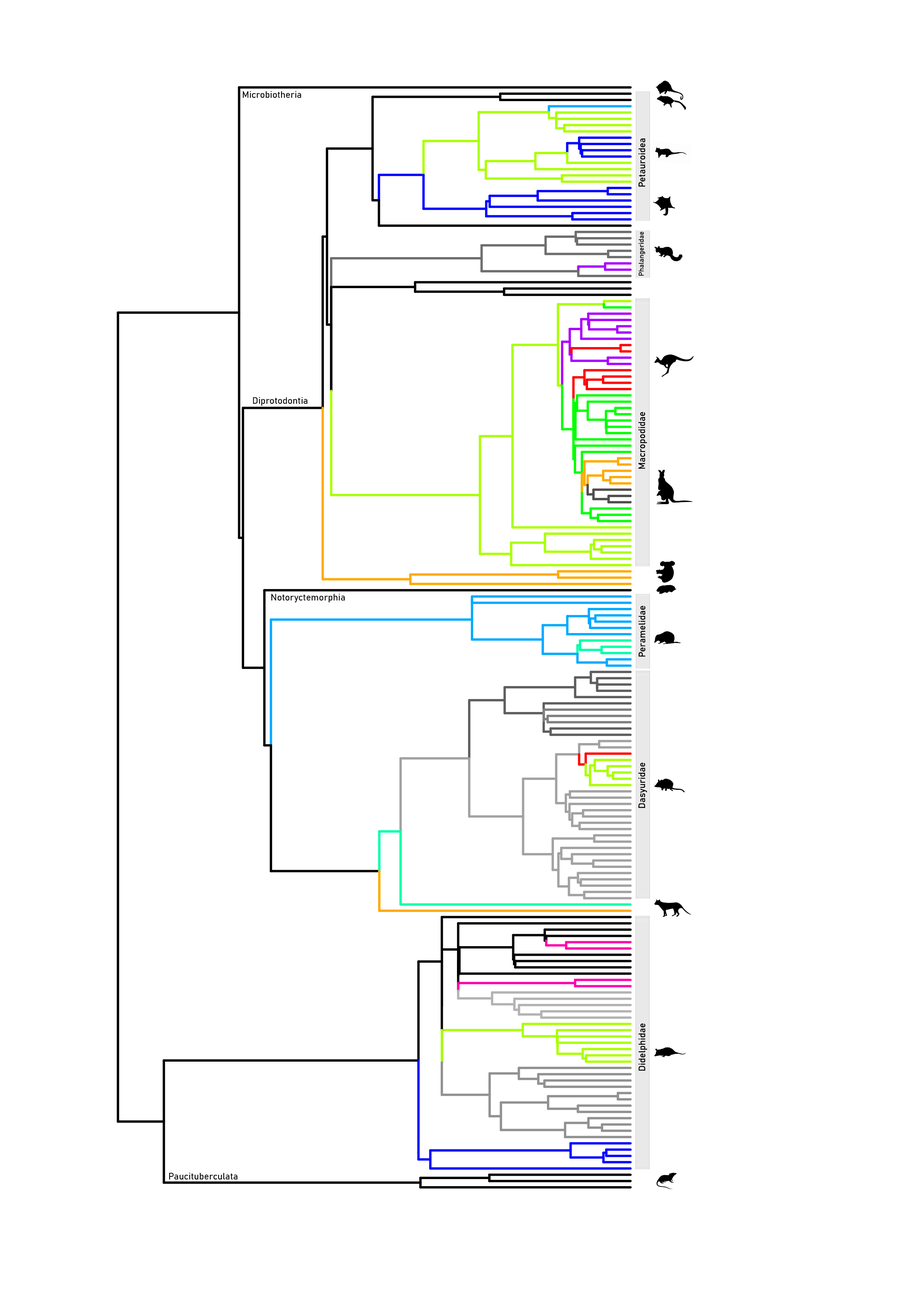
<style>
.page{position:relative;width:918px;height:1298px;background:#ffffff}
.page>*{position:absolute;margin:0}
.t1{font:9.3px "Bahnschrift";color:#000000}
.t2{font:6.9px "Bahnschrift";color:#000000}
</style>
<div class="page">
<p class="t1" style="left:243px;top:91px;width:58px;height:7px">Microbiotheria</p>
<p class="t1" style="left:639px;top:138px;width:7px;height:49px;rotate:-90deg">Petauroidea</p>
<p class="t2" style="left:639px;top:232px;width:7px;height:44px;rotate:-90deg">Phalangeridae</p>
<p class="t1" style="left:253px;top:397px;width:55px;height:9px">Diprotodontia</p>
<p class="t1" style="left:639px;top:412px;width:8px;height:57px;rotate:-90deg">Macropodidae</p>
<p class="t1" style="left:271px;top:594px;width:74px;height:9px">Notoryctemorphia</p>
<p class="t1" style="left:639px;top:606px;width:7px;height:51px;rotate:-90deg">Peramelidae</p>
<p class="t1" style="left:639px;top:763px;width:9px;height:45px;rotate:-90deg">Dasyuridae</p>
<p class="t1" style="left:639px;top:1024px;width:9px;height:47px;rotate:-90deg">Didelphidae</p>
<p class="t1" style="left:169px;top:1173px;width:68px;height:7px">Paucituberculata</p>
</div>
